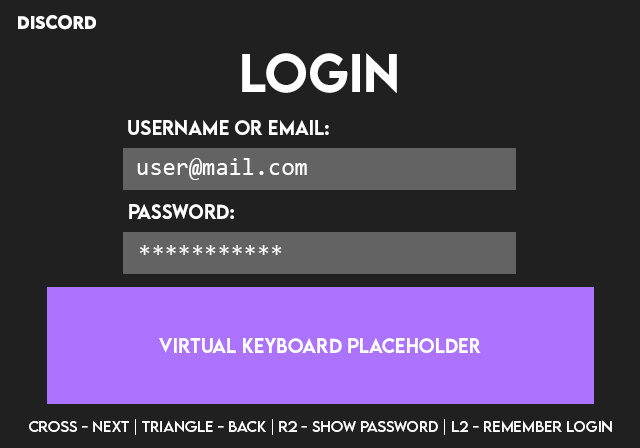
<style>
.page{position:relative;width:640px;height:448px;background:#202020}
.page>*{position:absolute;margin:0}
.t1{font:16px "LEMONMILK-Bold";color:#ffffff}
.t2{font:48px "LEMONMILK-Medium";color:#ffffff}
.t3{font:18px "LEMONMILK-Medium";color:#ffffff}
.t4{font:24px "Consolas";color:#ffffff}
.t5{font:14px "LEMONMILK-Regular";color:#ffffff}
</style>
<div class="page">
<p class="t1" style="left:18px;top:15px;width:78px;height:15px">DISCORD</p>
<p class="t2" style="left:242px;top:53px;width:155px;height:40px">LOGIN</p>
<p class="t3" style="left:128px;top:119px;width:201px;height:16px">USername or email:</p>
<p class="t4" style="left:137px;top:158px;width:170px;height:22px">user@mail.com</p>
<p class="t3" style="left:129px;top:204px;width:105px;height:15px">PASSWORD:</p>
<p class="t4" style="left:139px;top:245px;width:143px;height:10px">***********</p>
<p class="t3" style="left:159px;top:338px;width:322px;height:15px">VIRTUAL KEYBOARD PLACEHOLDER</p>
<p class="t5" style="left:29px;top:419px;width:583px;height:16px">CROSS - NEXT | TRIANGLE - BACK | R2 - SHOW PASSWORD | L2 - REMEMBER LOGIN</p>
</div>
